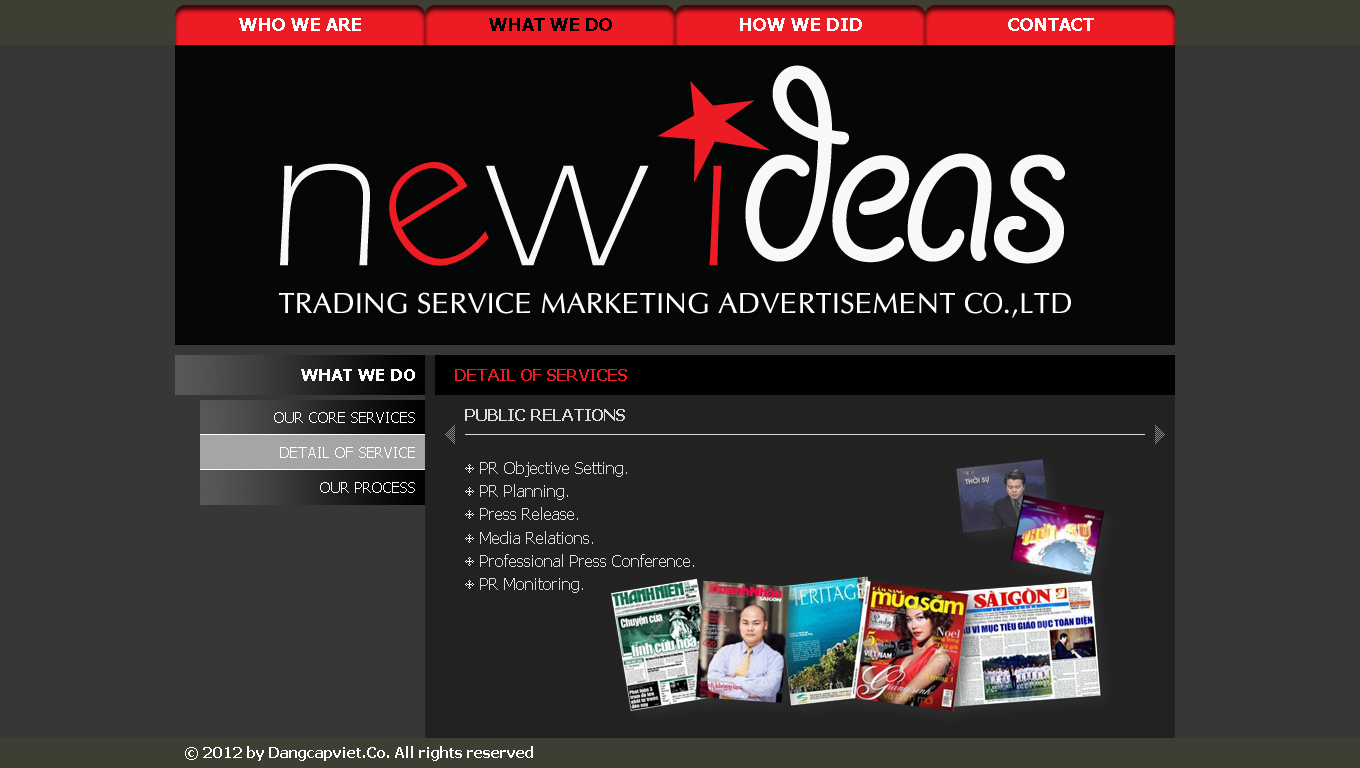
<style>
.page{position:relative;width:1360px;height:768px;background:#383636}
.page>*{position:absolute;margin:0}
.t1{font:18px "Tahoma-Bold";color:#ffffff}
.t2{font:18px "Tahoma-Bold";color:#000000}
.t3{font:17px "Tahoma-Bold";color:#ffffff}
.t4{font:16px "Tahoma-Bold";color:#ed1c24}
.t5{font:15px "Tahoma";color:#ffffff}
.t6{font:16px "Tahoma-Bold";color:#dcdcdc}
.t7{font:16px "Tahoma";color:#dcdcdc}
.t8{font:15px "Tahoma-Bold";color:#ffffff}
</style>
<div class="page">
<p class="t1" style="left:239px;top:18px;width:122px;height:13px">WHO WE ARE</p>
<p class="t2" style="left:489px;top:18px;width:123px;height:13px">WHAT WE DO</p>
<p class="t1" style="left:740px;top:18px;width:122px;height:13px">HOW WE DID</p>
<p class="t1" style="left:1008px;top:18px;width:86px;height:13px">CONTACT</p>
<p class="t3" style="left:301px;top:369px;width:114px;height:12px">WHAT WE DO</p>
<p class="t4" style="left:455px;top:369px;width:172px;height:12px">DETAIL OF SERVICES</p>
<p class="t5" style="left:274px;top:412px;width:141px;height:11px">OUR CORE SERVICES</p>
<p class="t6" style="left:465px;top:409px;width:160px;height:12px">PUBLIC RELATIONS</p>
<p class="t5" style="left:280px;top:447px;width:135px;height:11px">DETAIL OF SERVICE</p>
<p class="t7" style="left:480px;top:461px;width:214px;height:132px">PR Objective Setting.<br>PR Planning.<br>Press Release.<br>Media Relations.<br>Professional Press Conference.<br>PR Monitoring.</p>
<p class="t5" style="left:320px;top:482px;width:95px;height:11px">OUR PROCESS</p>
<p class="t8" style="left:185px;top:746px;width:348px;height:15px">© 2012 by Dangcapviet.Co. All rights reserved</p>
</div>
